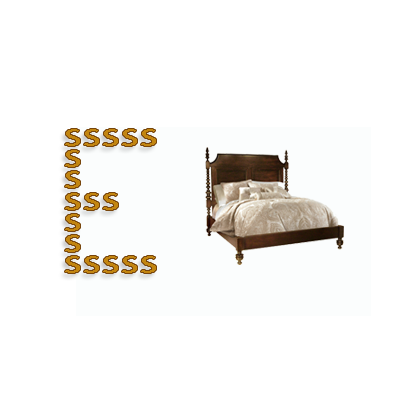
<style>
.page{position:relative;width:400px;height:400px;background:#ffffff}
.page>*{position:absolute;margin:0}
.t1{font:34.1px/21.3px "MyriadPro-Regular";color:#c28510;scale:1.41 1}
</style>
<div class="page">
<p class="t1" style="left:65px;top:129px;width:91px;height:144px">sssss<br>s<br>s<br>sss<br>s<br>s<br>sssss</p>
</div>
